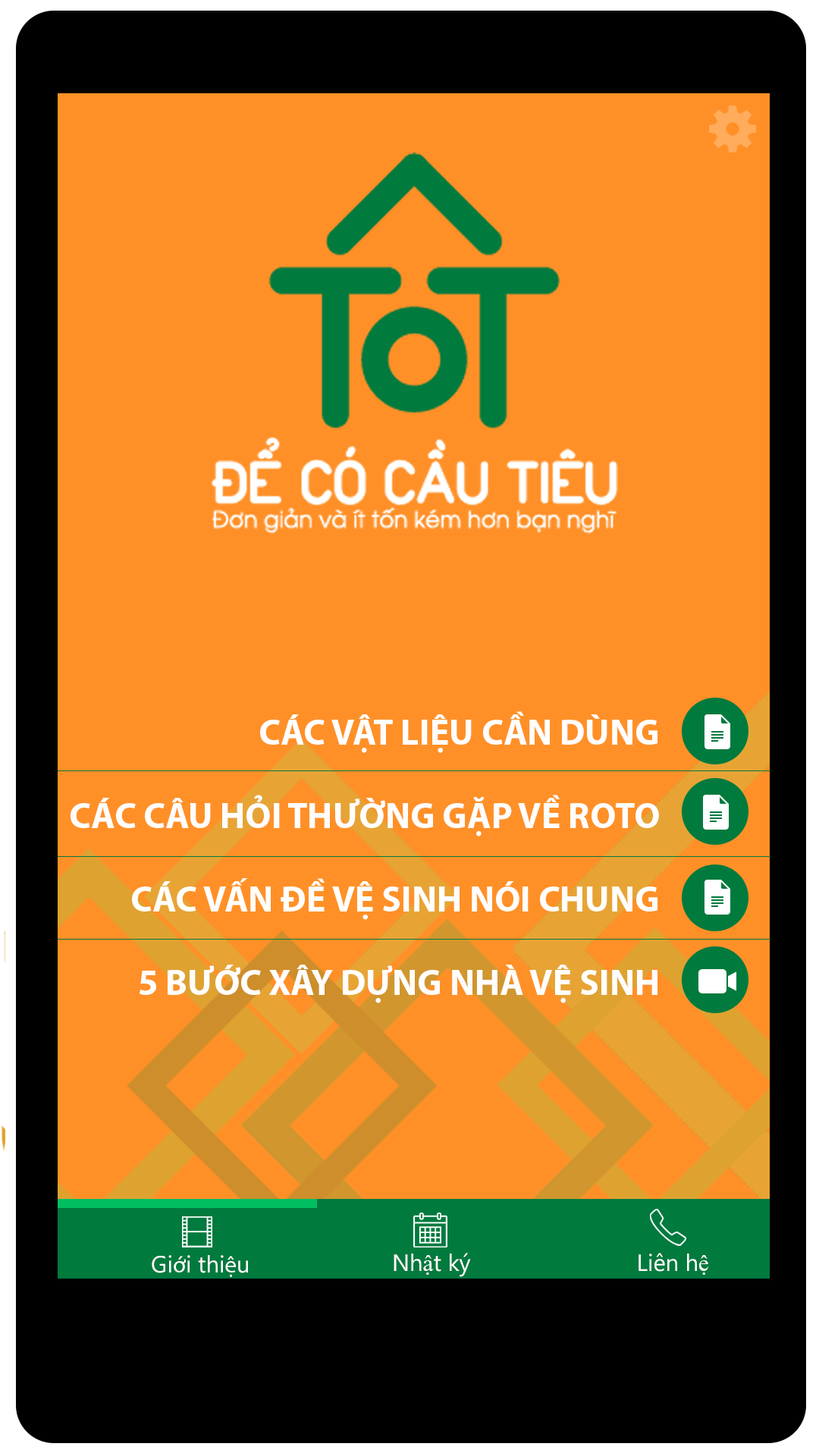
<style>
.page{position:relative;width:819px;height:1456px;background:#ff9027}
.page>*{position:absolute;margin:0}
.t1{font:36.4px "MyriadPro-Bold";color:#fffefd}
.t2{font:23.6px "MicrosoftNewTaiLue";color:#fffefd}
.t3{font:23.6px "TimesNewRomanPSMT";color:#fffefd}
.t4{font:23.6px "MyriadPro-Regular";color:#fffefd}
</style>
<div class="page">
<p class="t1" style="left:260px;top:711px;width:397px;height:42px">CÁC VẬT LIỆU CẦN DÙNG</p>
<p class="t1" style="left:71px;top:795px;width:588px;height:41px">CÁC CÂU HỎI THƯỜNG GẶP VỀ ROTO</p>
<p class="t1" style="left:140px;top:965px;width:517px;height:38px">5 BƯỚC XÂY DỰNG NHÀ VỆ SINH ROTO</p>
<p class="t2" style="left:394px;top:1253px;width:77px;height:24px">Nh<span class="t3">ậ</span>t ký</p>
<p class="t2" style="left:639px;top:1253px;width:69px;height:22px">Liên h<span class="t3">ệ</span></p>
<p class="t2" style="left:152px;top:1255px;width:96px;height:22px">Gi<span class="t4">ớ</span>i thi<span class="t4">ệ</span>u</p>
</div>
